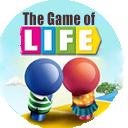
<style>
.page{position:relative;width:128px;height:128px;background:#ffffff}
.page>*{position:absolute;margin:0}
.t1{font:16px "Impact";color:#4a2c2c;scale:0.91 1}
</style>
<div class="page">
<p class="t1" style="left:22px;top:12px;width:73px;height:14px">The Game of</p>
</div>
